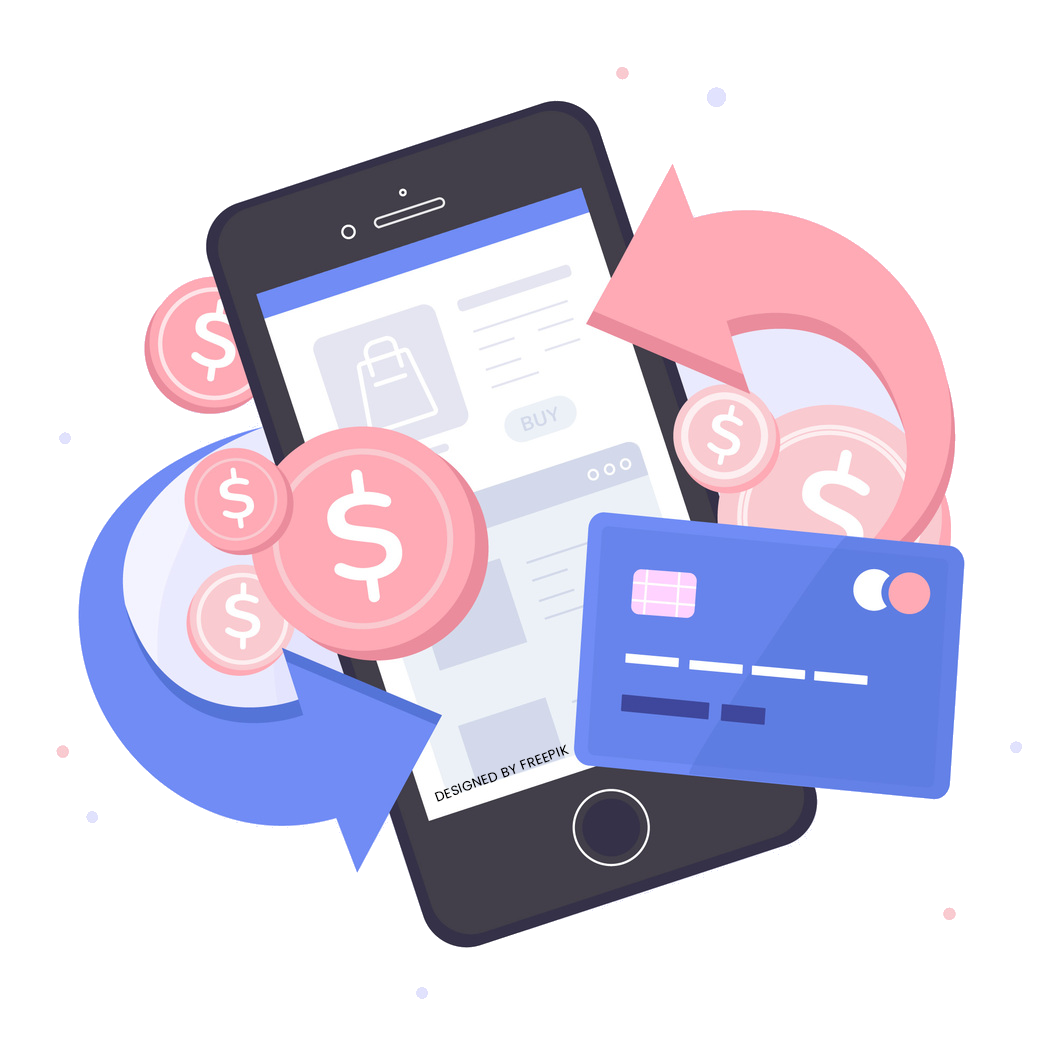
<style>
.page{position:relative;width:1056px;height:1056px;background:#ffffff}
.page>*{position:absolute;margin:0}
.t1{font:13.3px "Poppins-Regular";letter-spacing:0.03em;color:#000000;text-transform:uppercase}
</style>
<div class="page">
<p class="t1" style="left:434px;top:744px;width:136px;height:58px;rotate:-20deg">Designed bY Freepik</p>
</div>
